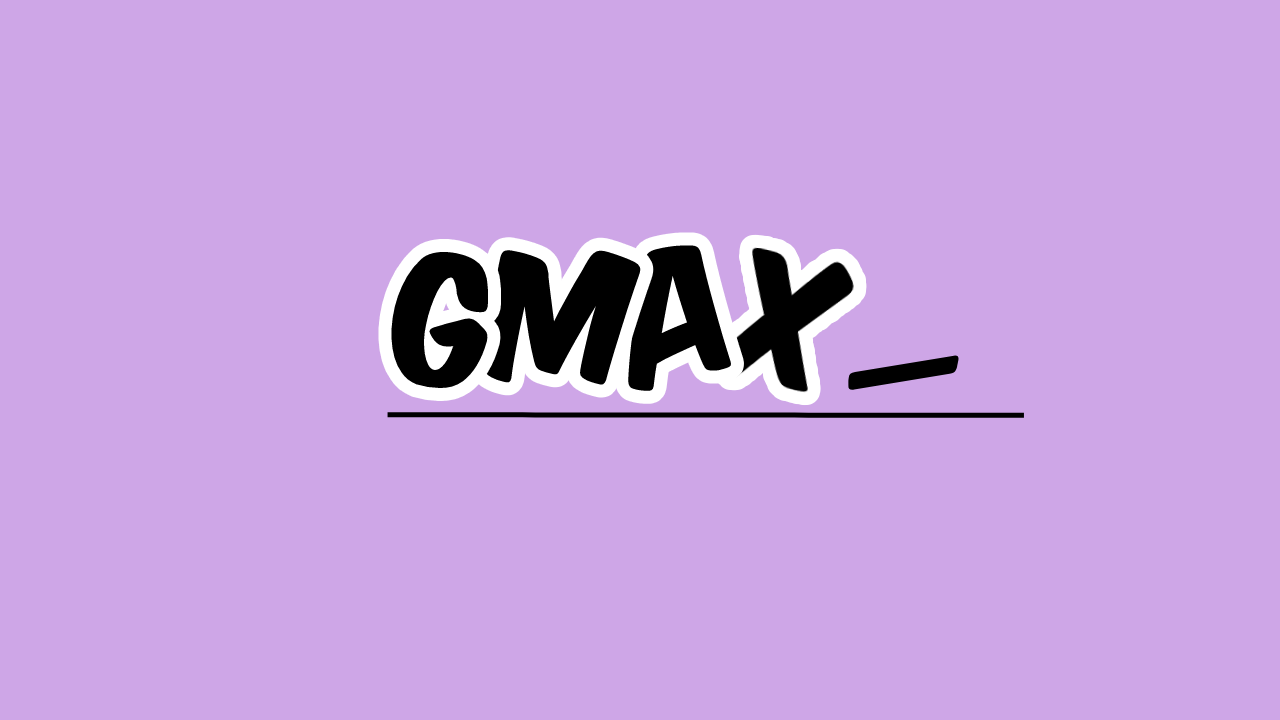
<style>
.page{position:relative;width:1280px;height:720px;background:#cea6e7}
.page>*{position:absolute;margin:0}
.t1{font:150px "KomikaTitle-Axis";color:#000000}
</style>
<div class="page">
<p class="t1" style="left:628px;top:245px;width:103px;height:146px;rotate:-17deg">a</p>
<p class="t1" style="left:391px;top:252px;width:97px;height:136px;rotate:-7deg">G</p>
<p class="t1" style="left:484px;top:249px;width:157px;height:137px;rotate:1deg">m</p>
<p class="t1" style="left:848px;top:355px;width:111px;height:35px;rotate:-9deg">_</p>
</div>
